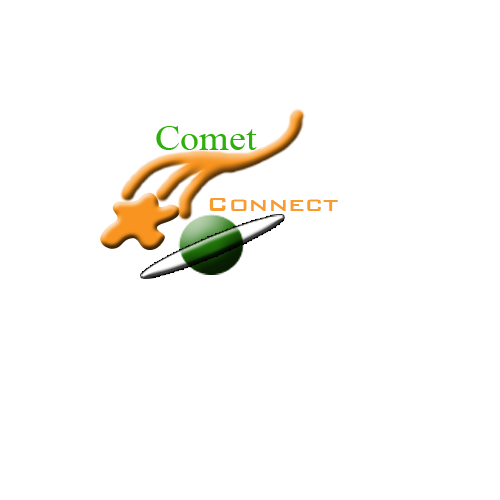
<style>
.page{position:relative;width:500px;height:500px;background:#ffffff}
.page>*{position:absolute;margin:0}
.t1{font:36px "TimesNewRomanPSMT";color:#2faf0c;scale:1.06 1}
.t2{font:26px "BankGothic-Medium";color:#f99c30;scale:1.06 1}
</style>
<div class="page">
<p class="t1" style="left:156px;top:126px;width:101px;height:24px">Comet</p>
<p class="t2" style="left:209px;top:198px;width:129px;height:13px">Connect</p>
</div>
